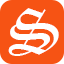
<style>
.page{position:relative;width:64px;height:64px;background:#f65314}
.page>*{position:absolute;margin:0}
.t1{font:70.8px "Canterbury-Regular";color:#ffffff}
</style>
<div class="page">
<p class="t1" style="left:8px;top:8px;width:51px;height:48px">S</p>
</div>
